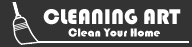
<style>
.page{position:relative;width:192px;height:47px;background:#333333}
.page>*{position:absolute;margin:0}
.t1{font:22px "Bauhaus93";color:#ffffff}
.t2{font:12px "Bauhaus93";color:#ffffff}
</style>
<div class="page">
<p class="t1" style="left:43px;top:9px;width:138px;height:16px">CLEANING ART</p>
<p class="t2" style="left:68px;top:28px;width:92px;height:9px">Clean Your Home</p>
</div>
